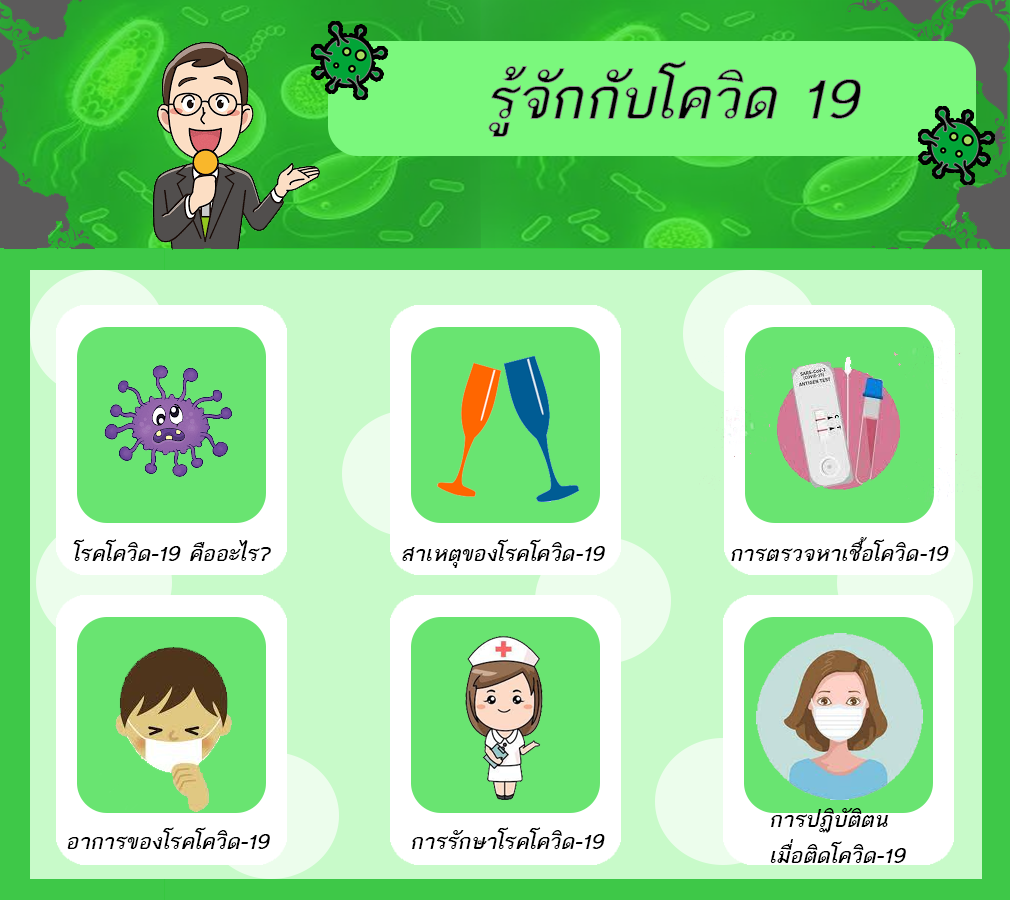
<style>
.page{position:relative;width:1010px;height:900px}
.page>*{position:absolute;margin:0}
.t1{font:30px "THBaijam-BoldItalic";color:#000000}
</style>
<div class="page">
<p class="t1" style="left:73px;top:539px;width:198px;height:22px">โรคโควิด-19 คืออะไร?</p>
<p class="t1" style="left:402px;top:539px;width:203px;height:29px">สาเหตุของโรคโควิด-19</p>
<p class="t1" style="left:731px;top:537px;width:218px;height:24px">การตรวจหาเชื้อโควิด-19</p>
<p class="t1" style="left:770px;top:808px;width:136px;height:55px">การปฏิบัติตน<br>เมื่อติดโควิด-19</p>
<p class="t1" style="left:67px;top:827px;width:203px;height:22px">อาการของโรคโควิด-19</p>
<p class="t1" style="left:412px;top:827px;width:193px;height:22px">การรักษาโรคโควิด-19</p>
</div>
